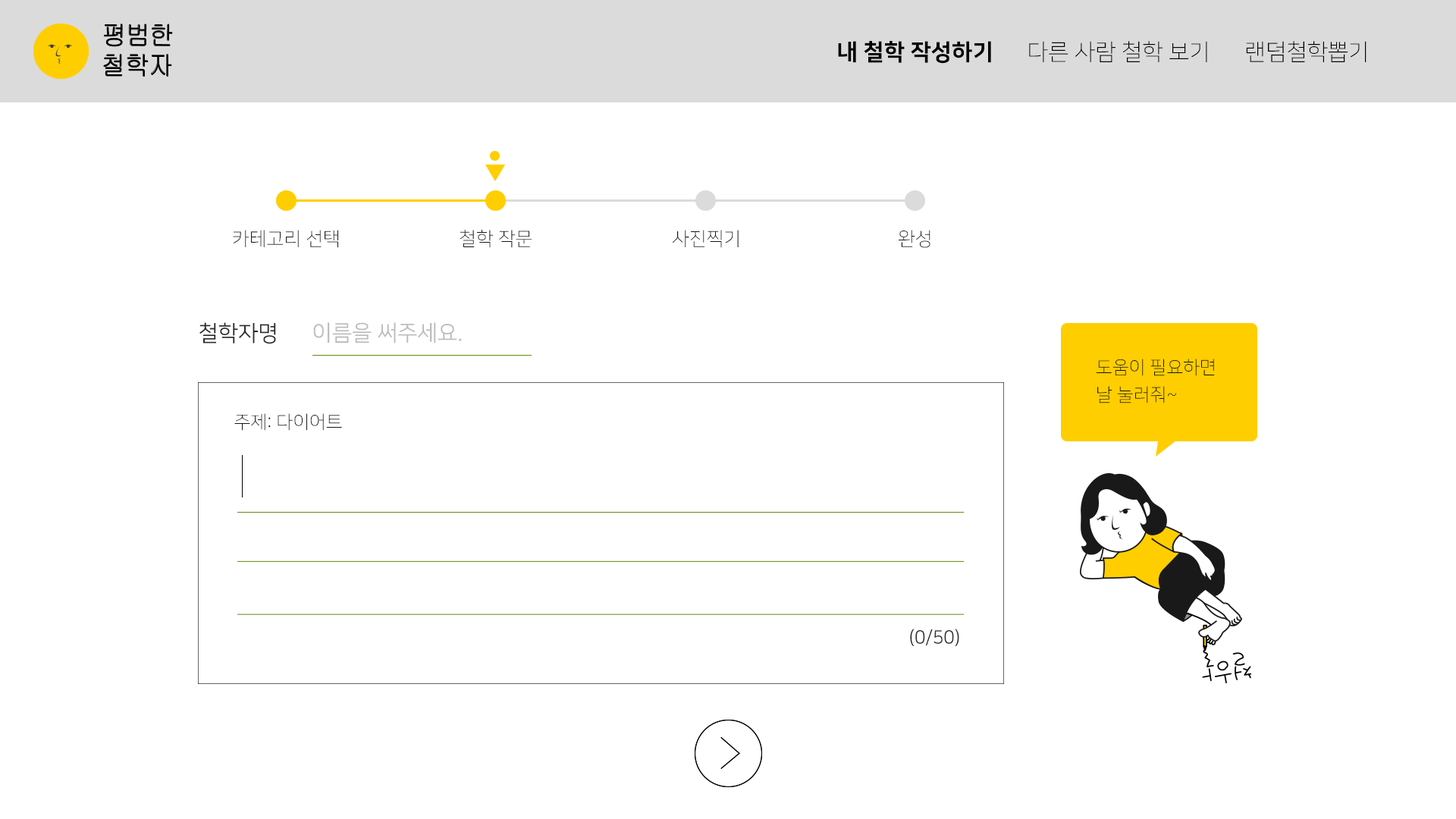
<style>
.page{position:relative;width:1456px;height:819px;background:#ffffff}
.page>*{position:absolute;margin:0}
.t1{font:22.7px "NanumSquareEB";color:#000000}
.t2{font:22.7px "NanumSquareL";color:#000000}
.t3{font:19px "NanumSquareL";color:#161616}
.t4{font:22px "NanumSquareR";color:#2a2a2a}
.t5{font:22px "NanumSquareR";color:#bdbdbd}
.t6{font:18.2px/27.3px "NanumSquareL";color:#161616}
.t7{font:18.2px "NanumSquareL";color:#161616}
.t8{font:18.2px "NanumSquareR";color:#2f2f2f}
</style>
<div class="page">
<p class="t1" style="left:838px;top:41px;width:153px;height:23px">내 철학 작성하기</p>
<p class="t2" style="left:1029px;top:41px;width:178px;height:21px">다른 사람 철학 보기</p>
<p class="t2" style="left:1246px;top:41px;width:120px;height:21px">랜덤철학뽑기</p>
<p class="t3" style="left:233px;top:230px;width:105px;height:18px">카테고리 선택</p>
<p class="t3" style="left:460px;top:230px;width:72px;height:18px">철학 작문</p>
<p class="t3" style="left:673px;top:230px;width:66px;height:18px">사진찍기</p>
<p class="t3" style="left:899px;top:230px;width:31px;height:18px">완성</p>
<p class="t4" style="left:199px;top:322px;width:77px;height:22px">철학자명</p>
<p class="t5" style="left:313px;top:322px;width:149px;height:21px">이름을 써주세요.</p>
<p class="t6" style="left:1096px;top:359px;width:119px;height:44px">도움이 필요하면<br>날 눌러줘~</p>
<p class="t7" style="left:234px;top:413px;width:108px;height:18px">주제: 다이어트</p>
<p class="t8" style="left:910px;top:629px;width:49px;height:17px">(0/50)</p>
</div>
